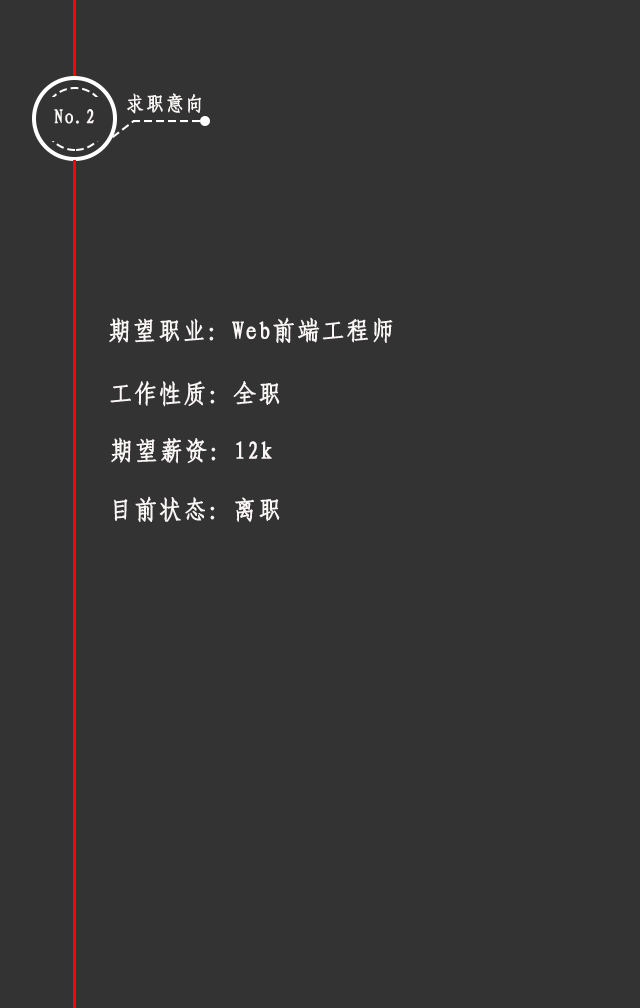
<style>
.page{position:relative;width:640px;height:1008px;background:#333333}
.page>*{position:absolute;margin:0}
.t1{font:20px "-G-s-u-n-0-0-m";letter-spacing:0.05em;color:#faf6f5;font-weight:bold;scale:0.92 1}
.t2{font:25px "-G-s-u-n-0-0-m";letter-spacing:0.05em;color:#faf6f5;font-weight:bold;scale:0.92 1}
</style>
<div class="page">
<p class="t1" style="left:127px;top:93px;width:74px;height:21px">求职意向</p>
<p class="t1" style="left:54px;top:109px;width:40px;height:15px">No.2</p>
<p class="t2" style="left:109px;top:317px;width:284px;height:26px">期望职业：Web前端工程师</p>
<p class="t2" style="left:110px;top:381px;width:170px;height:26px">工作性质：全职</p>
<p class="t2" style="left:111px;top:437px;width:161px;height:27px">期望薪资：12k</p>
<p class="t2" style="left:114px;top:496px;width:166px;height:26px">目前状态：离职</p>
</div>
